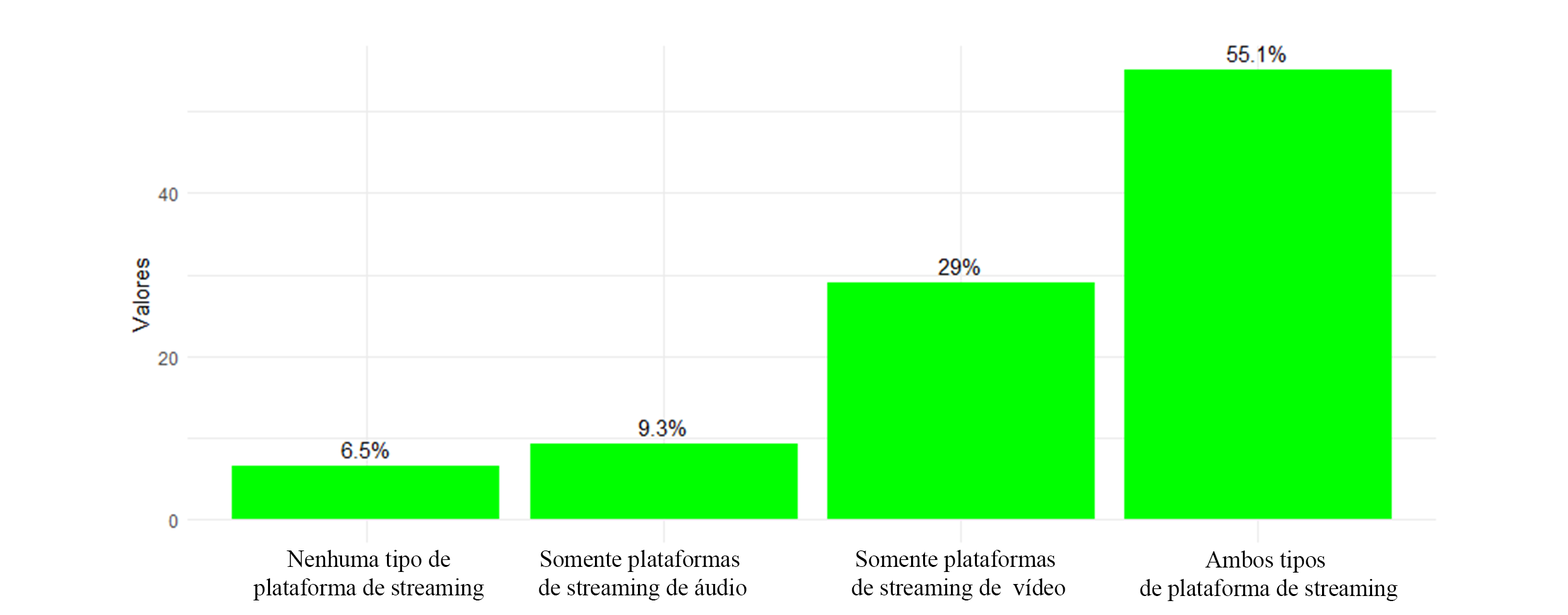
<style>
.page{position:relative;width:1568px;height:615px;background:#ffffff}
.page>*{position:absolute;margin:0}
.t1{font:23.7px "TimesNewRomanPSMT";color:#000000}
</style>
<div class="page">
<p class="t1" style="left:253px;top:549px;width:231px;height:51px;text-align:center">Nenhuma tipo de<br>plataforma de streaming</p>
<p class="t1" style="left:539px;top:549px;width:208px;height:51px;text-align:center">Somente plataformas <br>de streaming de áudio</p>
<p class="t1" style="left:852px;top:549px;width:213px;height:51px;text-align:center">Somente plataformas<br> de streaming de  vídeo</p>
<p class="t1" style="left:1140px;top:550px;width:258px;height:51px;text-align:center">Ambos tipos <br>de plataforma de streaming</p>
</div>
